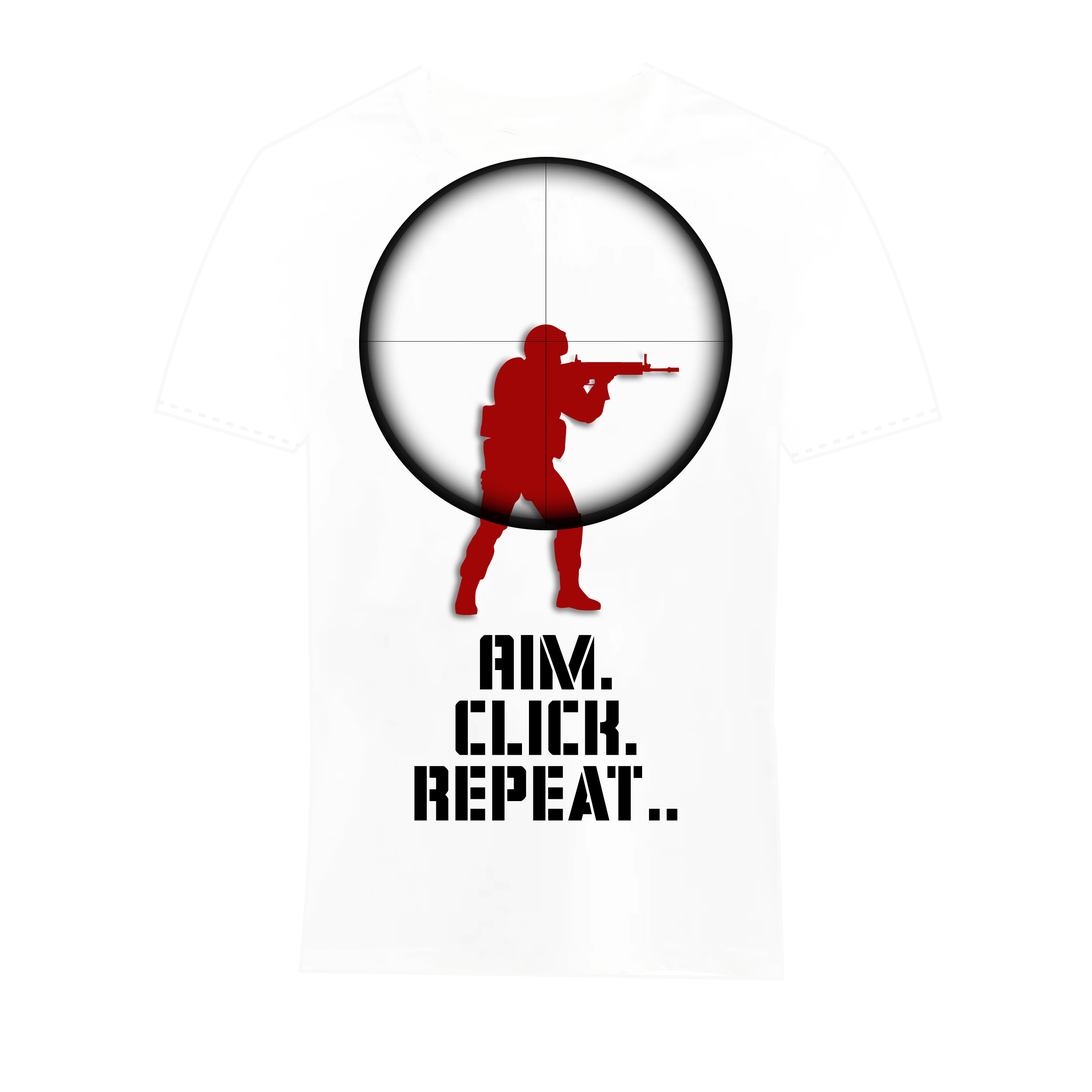
<style>
.page{position:relative;width:1092px;height:1092px;background:#ffffff}
.page>*{position:absolute;margin:0}
.t1{font:87.4px/65.5px "CovertOpsCondensed";color:#000000;scale:1.16 1}
</style>
<div class="page">
<p class="t1" style="left:414px;top:635px;width:263px;height:186px;text-align:center">.Aim<br>.click<br>..repeat</p>
</div>
